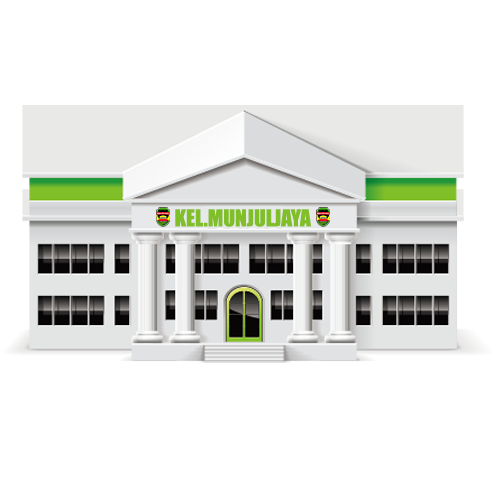
<style>
.page{position:relative;width:500px;height:500px;background:#ffffff}
.page>*{position:absolute;margin:0}
.t1{font:21.6px "Impact";color:#81bf29}
</style>
<div class="page">
<p class="t1" style="left:175px;top:209px;width:137px;height:18px">KEL.MUNJULJAYA</p>
</div>
